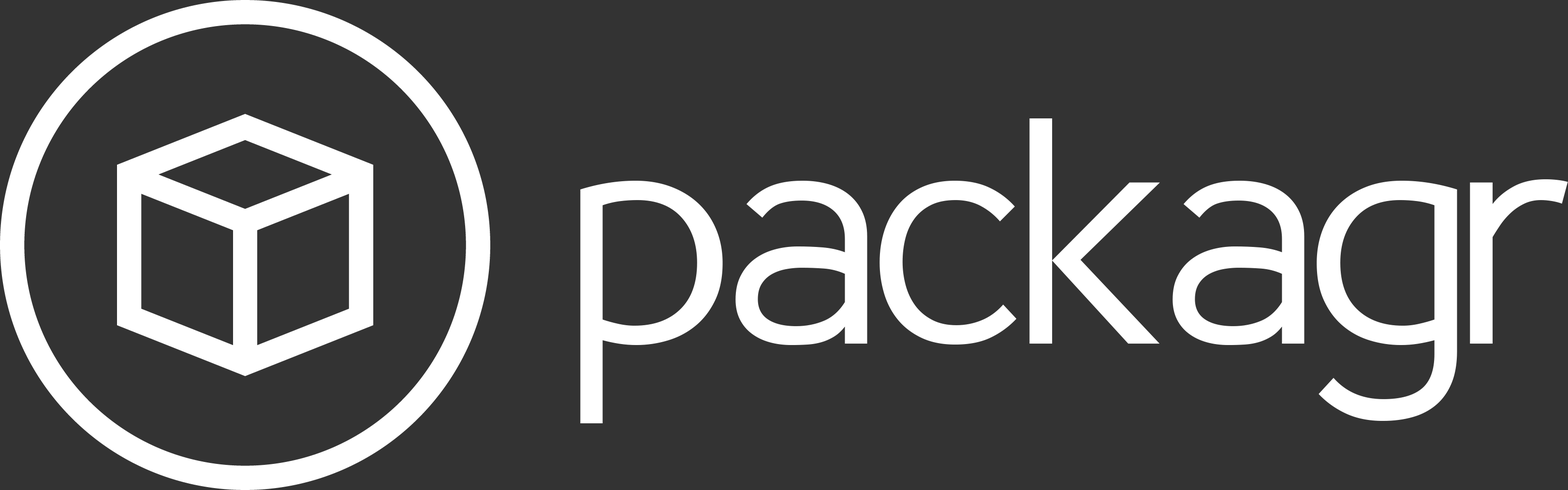
<style>
.page{position:relative;width:1568px;height:490px;background:#333333}
.page>*{position:absolute;margin:0}
.t1{font:322.3px "Berlin";color:#ffffff}
</style>
<div class="page">
<p class="t1" style="left:580px;top:118px;width:988px;height:306px">packagr</p>
</div>
